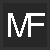
<style>
.page{position:relative;width:50px;height:50px;background:#272727}
.page>*{position:absolute;margin:0}
.t1{font:33.3px "Helvetica";color:#ffffff}
</style>
<div class="page">
<p class="t1" style="left:8px;top:13px;width:23px;height:24px">M</p>
<p class="t1" style="left:28px;top:13px;width:17px;height:24px">F</p>
</div>
